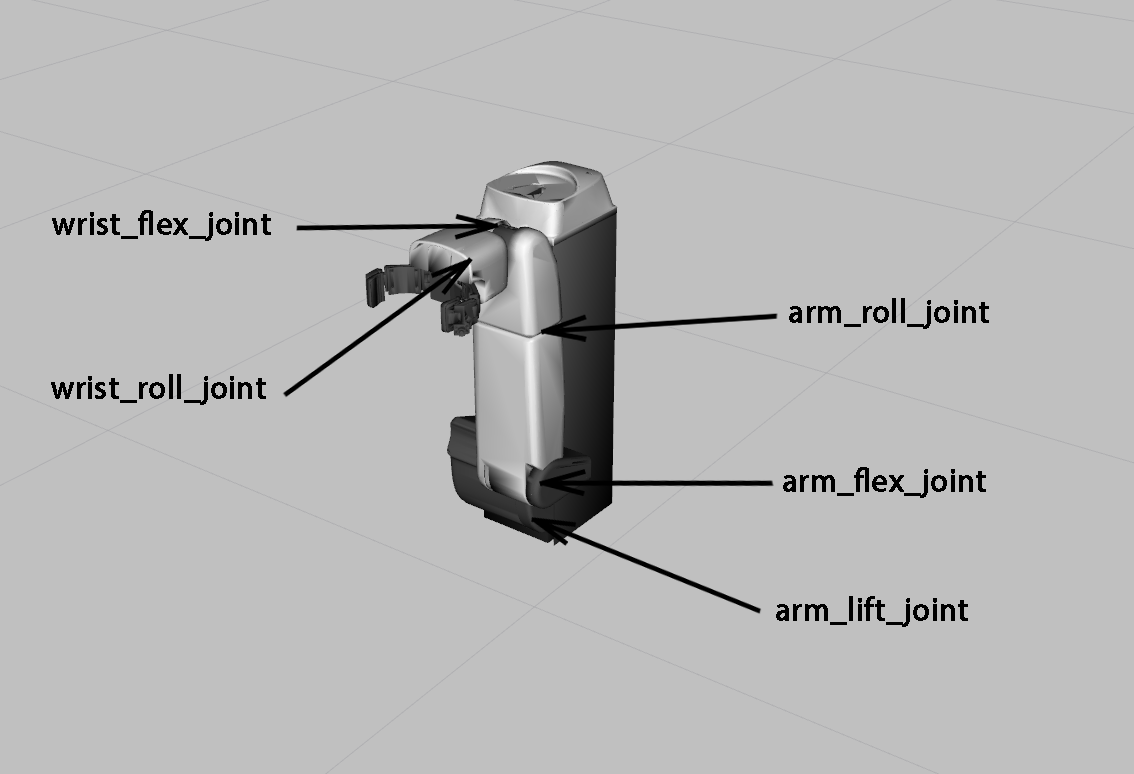
<style>
.page{position:relative;width:1134px;height:774px;background:#c0c0c0}
.page>*{position:absolute;margin:0}
.t1{font:32.7px "MyriadPro-Regular";letter-spacing:0.01em;color:#000000;font-weight:bold;scale:0.96 1}
</style>
<div class="page">
<p class="t1" style="left:52px;top:210px;width:219px;height:31px">wrist_flex_joint</p>
<p class="t1" style="left:789px;top:298px;width:200px;height:31px">arm_roll_joint</p>
<p class="t1" style="left:51px;top:374px;width:215px;height:31px">wrist_roll_joint</p>
<p class="t1" style="left:783px;top:467px;width:203px;height:31px">arm_flex_joint</p>
<p class="t1" style="left:776px;top:596px;width:192px;height:31px">arm_lift_joint</p>
</div>
